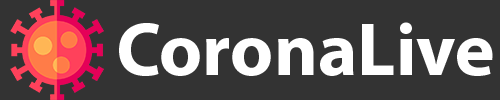
<style>
.page{position:relative;width:500px;height:100px;background:#333333}
.page>*{position:absolute;margin:0}
.t1{font:75px "MyriadPro-Bold";color:#ffffff}
</style>
<div class="page">
<p class="t1" style="left:119px;top:22px;width:374px;height:54px">CoronaLive</p>
</div>
